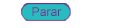
<style>
.page{position:relative;width:113px;height:28px;background:#ffffff}
.page>*{position:absolute;margin:0}
.t1{font:12.2px "ArialMT";color:#6f2c91}
</style>
<div class="page">
<p class="t1" style="left:32px;top:7px;width:30px;height:9px">Parar</p>
</div>
